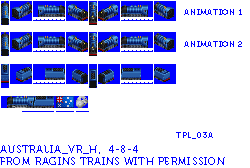
<style>
.page{position:relative;width:250px;height:168px;background:#ffffff}
.page>*{position:absolute;margin:0}
.t1{font:8px "Museo700-Regular";letter-spacing:0.075em;color:#0000ff;text-transform:uppercase}
.t2{font:10px "Museo700-Regular";letter-spacing:0.075em;color:#0000ff;text-transform:uppercase}
</style>
<div class="page">
<p class="t1" style="left:184px;top:9px;width:58px;height:6px">Animation 1</p>
<p class="t1" style="left:184px;top:41px;width:58px;height:6px">Animation 2</p>
<p class="t1" style="left:176px;top:132px;width:37px;height:7px">tpl_03a</p>
<p class="t2" style="left:0px;top:145px;width:225px;height:20px">Australia_VR_H, 4-8-4<br>from ragins trains with permission</p>
</div>
